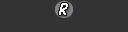
<style>
.page{position:relative;width:128px;height:32px;background:#333333}
.page>*{position:absolute;margin:0}
.t1{font:18px "DomDiagonalBT-Regular";letter-spacing:0.075em;color:#ffffff}
</style>
<div class="page">
<p class="t1" style="left:59px;top:3px;width:9px;height:12px">R</p>
</div>
